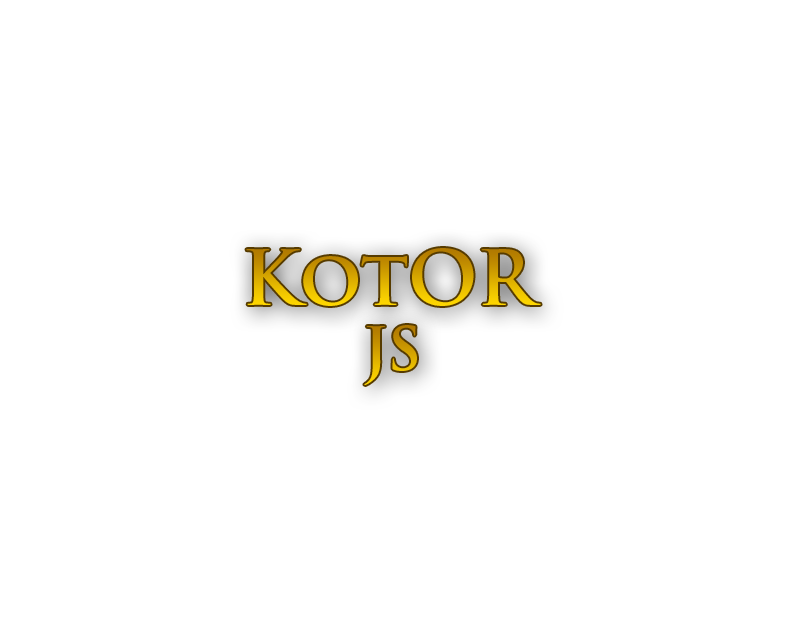
<style>
.page{position:relative;width:787px;height:632px;background:#ffffff}
.page>*{position:absolute;margin:0}
.t1{font:75px "TrajanPro-Bold"}
.t2{font:58.3px "TrajanPro-Bold"}
</style>
<div class="page">
<p class="t1" style="left:246px;top:248px;width:295px;height:58px">KotOR</p>
<p class="t2" style="left:364px;top:325px;width:53px;height:60px">JS</p>
</div>
